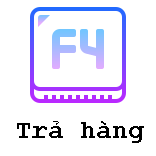
<style>
.page{position:relative;width:156px;height:156px;background:#ffffff}
.page>*{position:absolute;margin:0}
.t1{font:26px "CourierNewPS-BoldMT";color:#000000}
</style>
<div class="page">
<p class="t1" style="left:17px;top:121px;width:127px;height:22px">Trả hàng</p>
</div>
